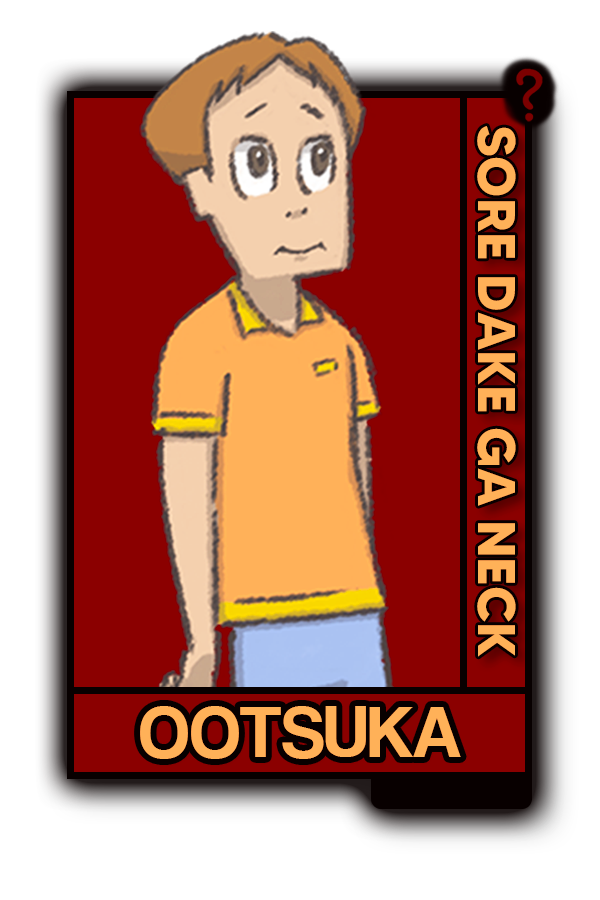
<style>
.page{position:relative;width:600px;height:900px;background:#8b0000}
.page>*{position:absolute;margin:0}
.t1{font:52.7px "MADETOMMY-Bold";color:#ffb158}
.t2{font:75px "CoolveticaRg-Regular";color:#ffb158}
</style>
<div class="page">
<p class="t1" style="left:477px;top:126px;width:39px;height:531px;rotate:90deg">SORE DAKE GA NECK</p>
<p class="t2" style="left:140px;top:706px;width:321px;height:53px">OOTSUKA</p>
</div>
